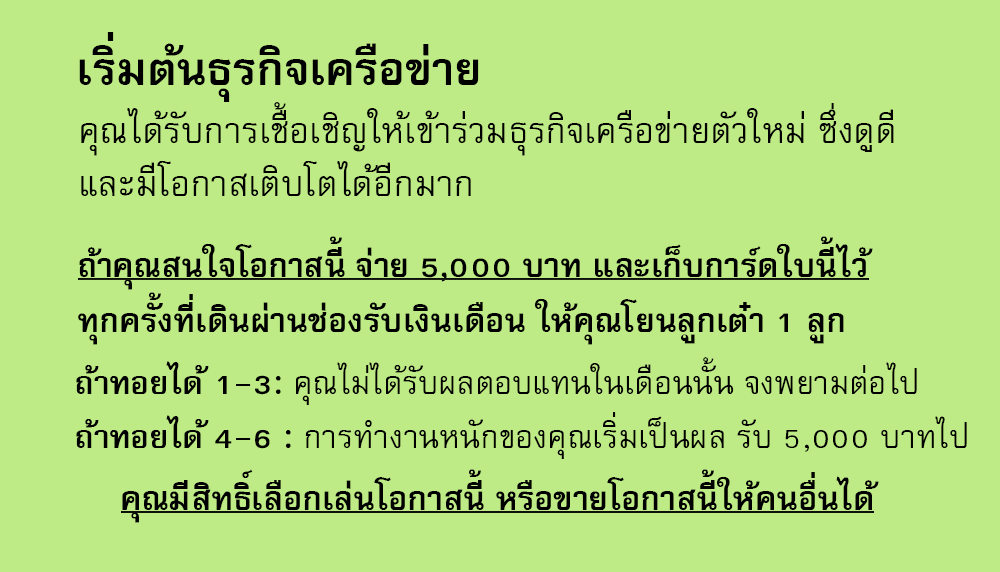
<style>
.page{position:relative;width:1000px;height:572px;background:#beeb85}
.page>*{position:absolute;margin:0}
.t1{font:64px "FreesiaUPCBold";color:#000000}
.t2{font:50px/53px "FreesiaUPC";color:#000000}
.t3{font:46px "FreesiaUPCBold";color:#000000}
.t4{font:45px "FreesiaUPC";color:#000000}
.t5{font:45px "FreesiaUPCBold";color:#000000}
</style>
<div class="page">
<p class="t1" style="left:79px;top:32px;width:400px;height:70px">เริ่มต้นธุรกิจเครือข่าย</p>
<p class="t2" style="left:81px;top:102px;width:813px;height:94px">คุณได้รับการเชื้อเชิญให้เข้าร่วมธุรกิจเครือข่ายตัวใหม่ ซึ่งดูดี<br>และมีโอกาสเติบโตได้อีกมาก</p>
<p class="t3" style="left:78px;top:236px;width:795px;height:109px">ถ้าคุณสนใจโอกาสนี้ จ่าย 5,000 บาท และเก็บการ์ดใบนี้ไว้<br>ทุกครั้งที่เดินผ่านช่องรับเงินเดือน ให้คุณโยนลูกเต๋า 1 ลูก</p>
<p class="t4" style="left:76px;top:357px;width:891px;height:102px"><span class="t5">ถ้าทอยได้ 1-3: </span>คุณไม่ได้รับผลตอบแทนในเดือนนั้น จงพยามต่อไป<br><span class="t5">ถ้าทอยได้ 4-6 : </span>การทำงานหนักของคุณเริ่มเป็นผล รับ 5,000 บาทไป</p>
<p class="t3" style="left:122px;top:469px;width:757px;height:54px">คุณมีสิทธิ์เลือกเล่นโอกาสนี้ หรือขายโอกาสนี้ให้คนอื่นได้</p>
</div>
